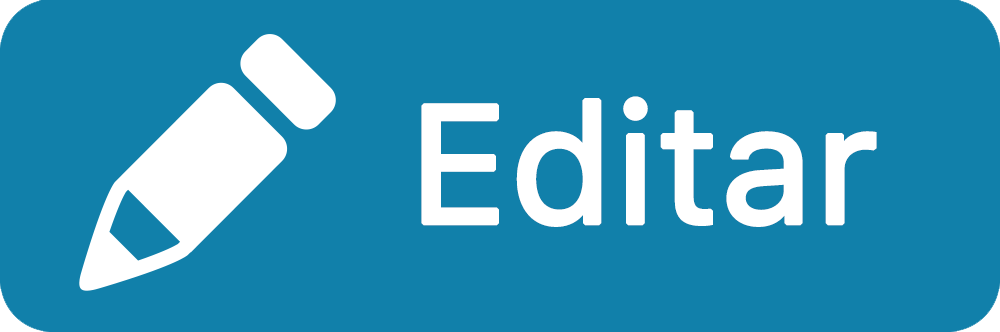
<style>
.page{position:relative;width:1000px;height:332px;background:#1180aa}
.page>*{position:absolute;margin:0}
.t1{font:166.7px "SFProText-Regular";color:#ffffff;font-weight:bold}
</style>
<div class="page">
<p class="t1" style="left:421px;top:96px;width:456px;height:131px">Editar</p>
</div>
